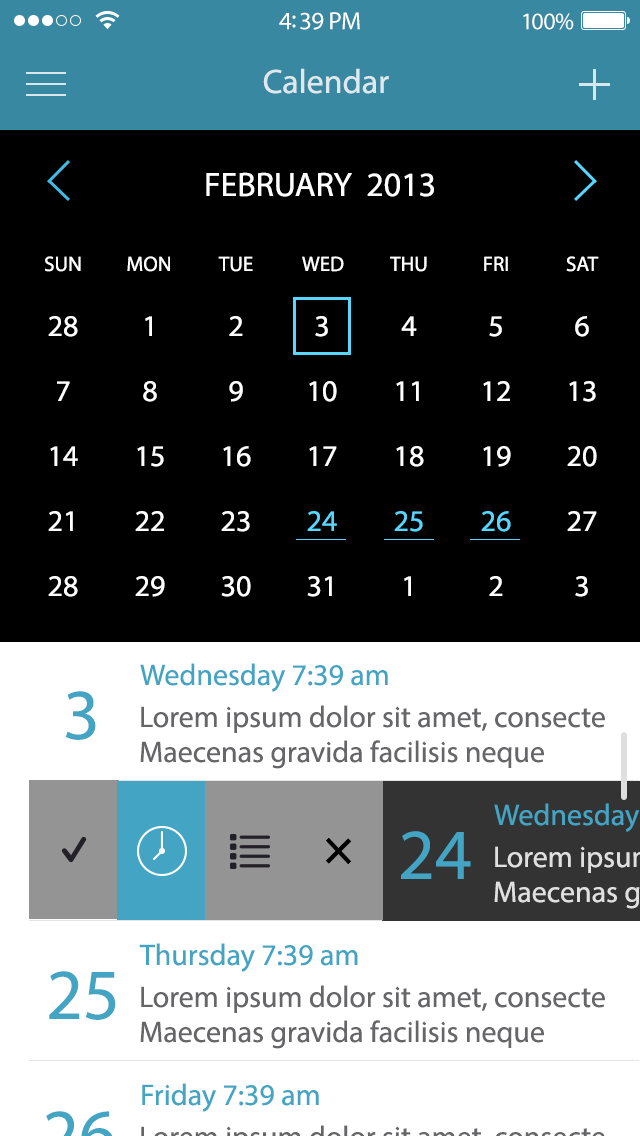
<style>
.page{position:relative;width:640px;height:1136px;background:#000000}
.page>*{position:absolute;margin:0}
.t1{font:25px "MyriadPro-Regular";letter-spacing:-0.02em;color:#ffffff}
.t2{font:24px "MyriadPro-Regular";letter-spacing:-0.02em;color:#ffffff}
.t3{font:34px "MyriadPro-Regular";color:#dfe9ed}
.t4{font:34px "MyriadPro-Regular";color:#ffffff;text-transform:uppercase}
.t5{font:21px "MyriadPro-Regular";color:#ffffff;text-transform:uppercase}
.t6{font:30px/65px "MyriadPro-Regular";color:#ffffff;text-transform:uppercase}
.t7{font:30px/65px "MyriadPro-Regular";color:#57d6ff;text-transform:uppercase}
.t8{font:30px "MyriadPro-Regular";color:#44a4c3}
.t9{font:72px "MyriadPro-Regular";color:#44a4c3;text-transform:uppercase}
.t10{font:30px/35px "MyriadPro-Regular";color:#666568}
.t11{font:30px/20px "MyriadPro-Regular";color:#666568;text-transform:uppercase}
</style>
<div class="page">
<p class="t1" style="left:279px;top:12px;width:81px;height:18px">4:39 PM</p>
<p class="t2" style="left:523px;top:13px;width:51px;height:17px">100%</p>
<p class="t3" style="left:263px;top:68px;width:126px;height:26px">Calendar</p>
<p class="t4" style="left:206px;top:172px;width:228px;height:25px">February  2013</p>
<p class="t5" style="left:45px;top:256px;width:36px;height:16px">SUN</p>
<p class="t5" style="left:127px;top:256px;width:43px;height:16px">MON</p>
<p class="t5" style="left:218px;top:256px;width:35px;height:16px">TUE</p>
<p class="t5" style="left:302px;top:256px;width:42px;height:16px">WED</p>
<p class="t5" style="left:390px;top:256px;width:37px;height:16px">THU</p>
<p class="t5" style="left:484px;top:256px;width:24px;height:15px">FRI</p>
<p class="t5" style="left:566px;top:256px;width:33px;height:16px">SAT</p>
<p class="t6" style="left:48px;top:316px;width:30px;height:281px;text-align:center">28<br>7<br>14<br>21<br>28</p>
<p class="t6" style="left:135px;top:316px;width:30px;height:281px;text-align:center">1<br>8<br>15<br>22<br>29</p>
<p class="t6" style="left:221px;top:316px;width:30px;height:281px;text-align:center">2<br>9<br>16<br>23<br>30</p>
<p class="t6" style="left:307px;top:316px;width:30px;height:281px;text-align:center">3<br>10<br>17<br><span class="t7">24<br></span>31</p>
<p class="t6" style="left:394px;top:316px;width:30px;height:280px;text-align:center">4<br>11<br>18<br><span class="t7">25<br></span>1</p>
<p class="t6" style="left:481px;top:316px;width:30px;height:280px;text-align:center">5<br>12<br>19<br><span class="t7">26<br></span>2</p>
<p class="t6" style="left:567px;top:316px;width:30px;height:281px;text-align:center">6<br>13<br>20<br>27<br>3</p>
<p class="t8" style="left:140px;top:663px;width:248px;height:29px">Wednesday 7:39 am</p>
<p class="t9" style="left:66px;top:691px;width:30px;height:49px">3</p>
<p class="t10" style="left:140px;top:705px;width:465px;height:64px"><span class="t11"><br></span>Lorem ipsum dolor sit amet, consecte<br>Maecenas gravida facilisis neque</p>
<p class="t9" style="left:401px;top:831px;width:70px;height:48px">24</p>
<p class="t8" style="left:139px;top:943px;width:219px;height:29px">Thursday 7:39 am</p>
<p class="t9" style="left:49px;top:971px;width:67px;height:49px">25</p>
<p class="t10" style="left:140px;top:985px;width:465px;height:64px"><span class="t11"><br></span>Lorem ipsum dolor sit amet, consecte<br>Maecenas gravida facilisis neque</p>
<p class="t8" style="left:142px;top:1083px;width:177px;height:29px">Friday 7:39 am</p>
</div>
